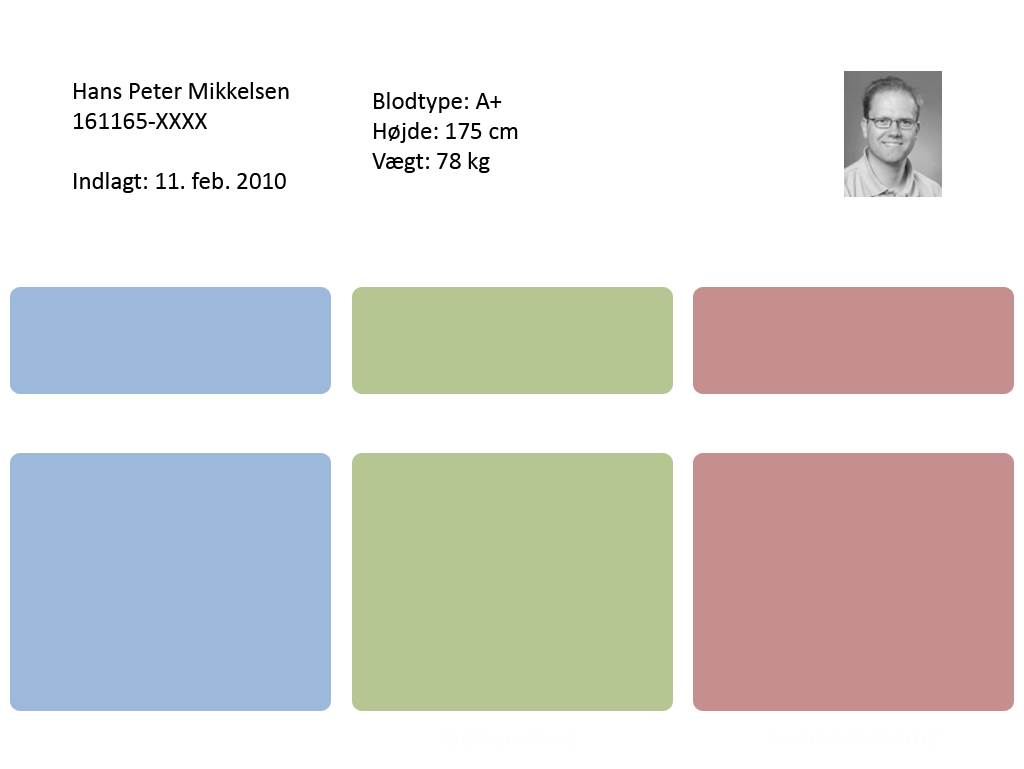
<style>
.page{position:relative;width:1024px;height:769px;background:#ffffff}
.page>*{position:absolute;margin:0}
.t1{font:25px "Calibri";color:#000000}
</style>
<div class="page">
<p class="t1" style="left:74px;top:82px;width:215px;height:111px">Hans Peter Mikkelsen<br>161165-XXXX<br><br>Indlagt: 11. feb. 2010</p>
<p class="t1" style="left:372px;top:92px;width:146px;height:81px">Blodtype: A+<br>Højde: 175 cm<br>Vægt: 78 kg</p>
</div>
